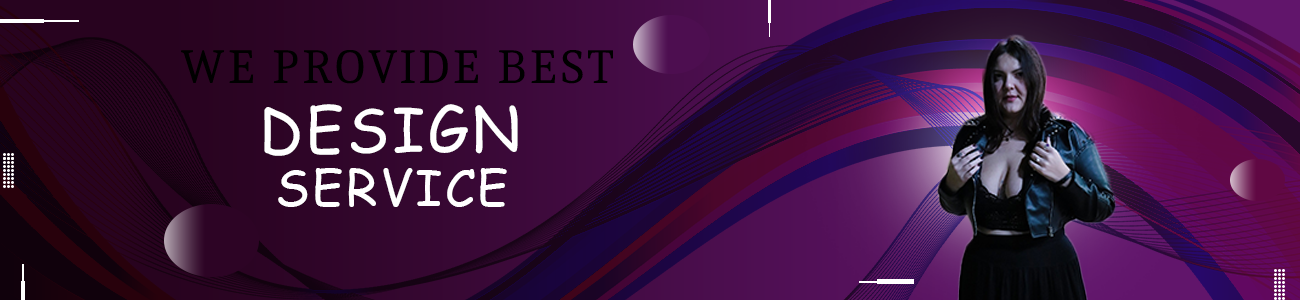
<style>
.page{position:relative;width:1300px;height:300px}
.page>*{position:absolute;margin:0}
.t1{font:49.1px "Caladea-Regular";letter-spacing:0.05em;color:#000000;text-transform:uppercase}
.t2{font:60.5px "ComicSansMS";letter-spacing:0.05em;color:#ffffff;text-transform:uppercase}
.t3{font:50px "ComicSansMS";letter-spacing:0.05em;color:#ffffff;text-transform:uppercase}
</style>
<div class="page">
<p class="t1" style="left:181px;top:50px;width:432px;height:34px">WE PROVIDE BEST</p>
<p class="t2" style="left:264px;top:104px;width:254px;height:52px">DESIGN</p>
<p class="t3" style="left:278px;top:168px;width:229px;height:39px">SERVICE</p>
</div>
